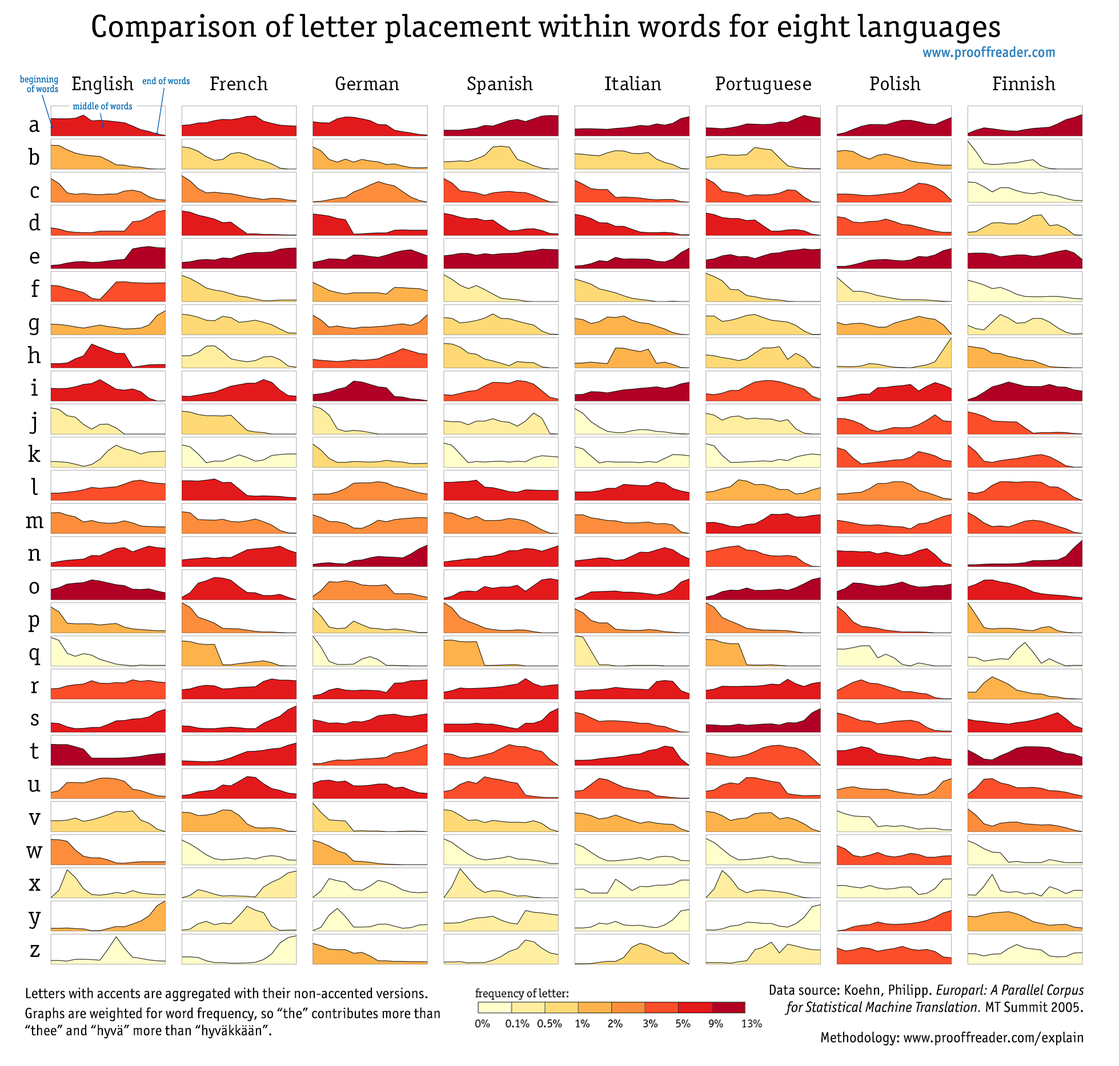
<style>
.page{position:relative;width:1119px;height:1066px;background:#ffffff}
.page>*{position:absolute;margin:0}
.t1{font:31.9px "OfficinaSerITCStd-Book";letter-spacing:0.01em;color:#000000;scale:1.08 1}
.t2{font:14.7px "OfficinaSansITCStd-Medium";letter-spacing:0.01em;color:#2b82bf}
.t3{font:19.7px "OfficinaSerITCStd-Book";letter-spacing:0.01em;color:#000000;scale:1.04 1}
.t4{font:24.1px "OfficinaSerITCStd-Book";letter-spacing:0.01em;color:#000000;scale:1.04 1}
.t5{font:14.7px "OfficinaSansITCStd-Book";letter-spacing:0.01em;color:#000000}
.t6{font:14.7px "OfficinaSansITCStd-BookItalic";letter-spacing:0.01em;color:#000000}
</style>
<div class="page">
<p class="t1" style="left:92px;top:14px;width:908px;height:30px">Comparison of letter placement within words for eight languages</p>
<p class="t2" style="left:922px;top:46px;width:133px;height:15px">www.prooffreader.com</p>
<p class="t3" style="left:72px;top:76px;width:983px;height:18px">English                 French               German               Spanish                Italian            Portuguese             Polish                Finnish</p>
<p class="t4" style="left:26px;top:120px;width:17px;height:837px;text-align:center">a<br>b<br>c<br>d<br>e<br>f<br>g<br>h<br>i<br>j<br>k<br>l<br>m<br>n<br>o<br>p<br>q<br>r<br>s<br>t<br>u<br>v<br>w<br>x<br>y<br>z</p>
<p class="t5" style="left:25px;top:987px;width:415px;height:52px">Letters with accents are aggregated with their non-accented versions.<br>Graphs are weighted for word frequency, so “the” contributes more than “thee” and “hyvä” more than “hyväkkään”.</p>
<p class="t6" style="left:769px;top:984px;width:315px;height:62px;text-align:right"><span class="t5">Data source: Koehn, Philipp. </span>Europarl: A Parallel Corpus for Statistical Machine Translation.<span class="t5"> MT Summit 2005.<br><br>Methodology: www.prooffreader.com/explain</span></p>
</div>
